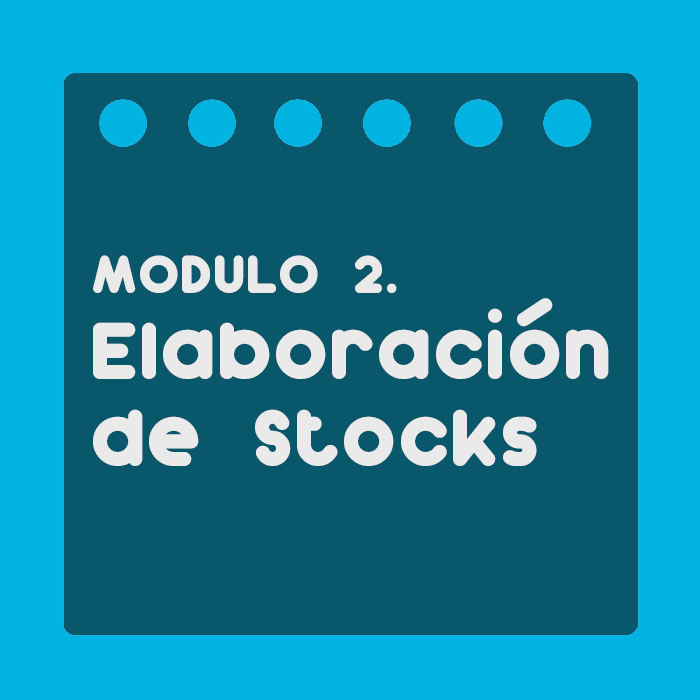
<style>
.page{position:relative;width:700px;height:700px;background:#09576b}
.page>*{position:absolute;margin:0}
.t1{font:72px "Dunkin";color:#eaeaea}
.t2{font:48px "Dunkin";color:#eaeaea}
</style>
<div class="page">
<p class="t1" style="left:93px;top:255px;width:516px;height:211px"><span class="t2">MODULO 2. <br></span>Elaboración <br>de Stocks</p>
</div>
